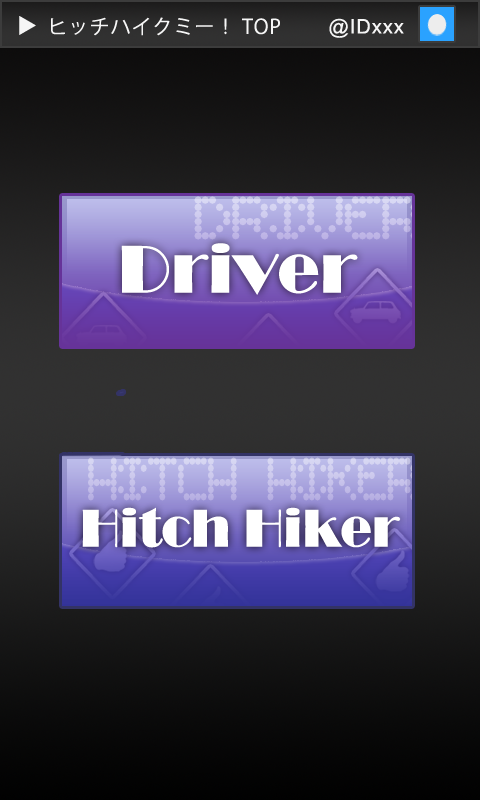
<style>
.page{position:relative;width:480px;height:800px}
.page>*{position:absolute;margin:0}
.t1{font:20px "KozGoPr6N-Regular";letter-spacing:0.05em;color:#f6f6f6}
.t2{font:20px "ArialMT";letter-spacing:0.05em;color:#f6f6f6}
.t3{font:70px "Broadway";color:#ffffff}
.t4{font:55px "Broadway";color:#ffffff;scale:0.95 1}
</style>
<div class="page">
<p class="t1" style="left:19px;top:16px;width:17px;height:19px;rotate:-90deg">▼</p>
<p class="t1" style="left:51px;top:17px;width:229px;height:19px">ヒッチハイクミー！ TOP</p>
<p class="t2" style="left:329px;top:18px;width:75px;height:20px">@IDxxx</p>
<p class="t3" style="left:121px;top:243px;width:237px;height:52px">Driver</p>
<p class="t4" style="left:82px;top:507px;width:319px;height:41px">Hitch Hiker</p>
</div>
